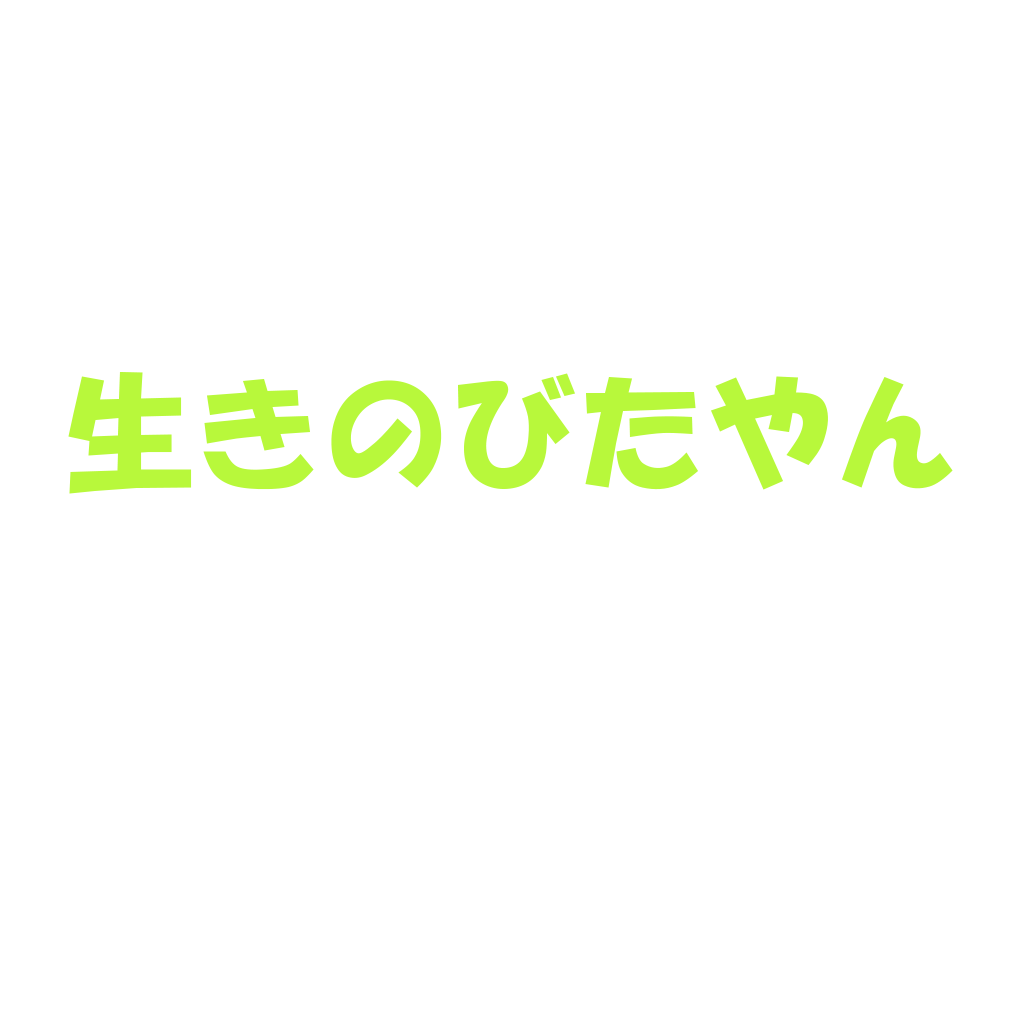
<style>
.page{position:relative;width:1024px;height:1024px;background:#ffffff}
.page>*{position:absolute;margin:0}
.t1{font:128px "HGSSoeiKakupoptai";color:#b8f83b}
</style>
<div class="page">
<p class="t1" style="left:68px;top:372px;width:885px;height:122px">生きのびたやん</p>
</div>
